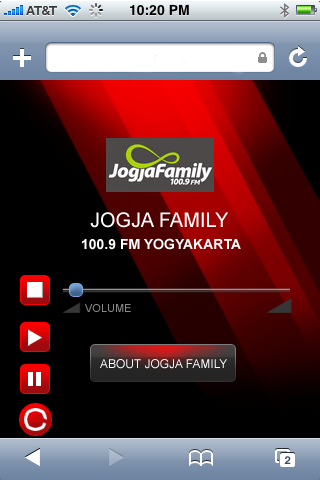
<style>
.page{position:relative;width:320px;height:480px;background:#000000}
.page>*{position:absolute;margin:0}
.t1{font:20px "ArialMT";color:#ffffff}
.t2{font:14px "Arial-BoldMT";color:#ffffff}
.t3{font:11px "ArialMT";color:#898989}
.t4{font:12px "ArialMT";color:#ffffff}
</style>
<div class="page">
<p class="t1" style="left:90px;top:212px;width:139px;height:16px">JOGJA FAMILY</p>
<p class="t2" style="left:82px;top:238px;width:159px;height:12px">100.9 FM YOGYAKARTA</p>
<p class="t3" style="left:85px;top:304px;width:46px;height:8px">VOLUME</p>
<p class="t4" style="left:100px;top:359px;width:127px;height:10px">ABOUT JOGJA FAMILY</p>
</div>
